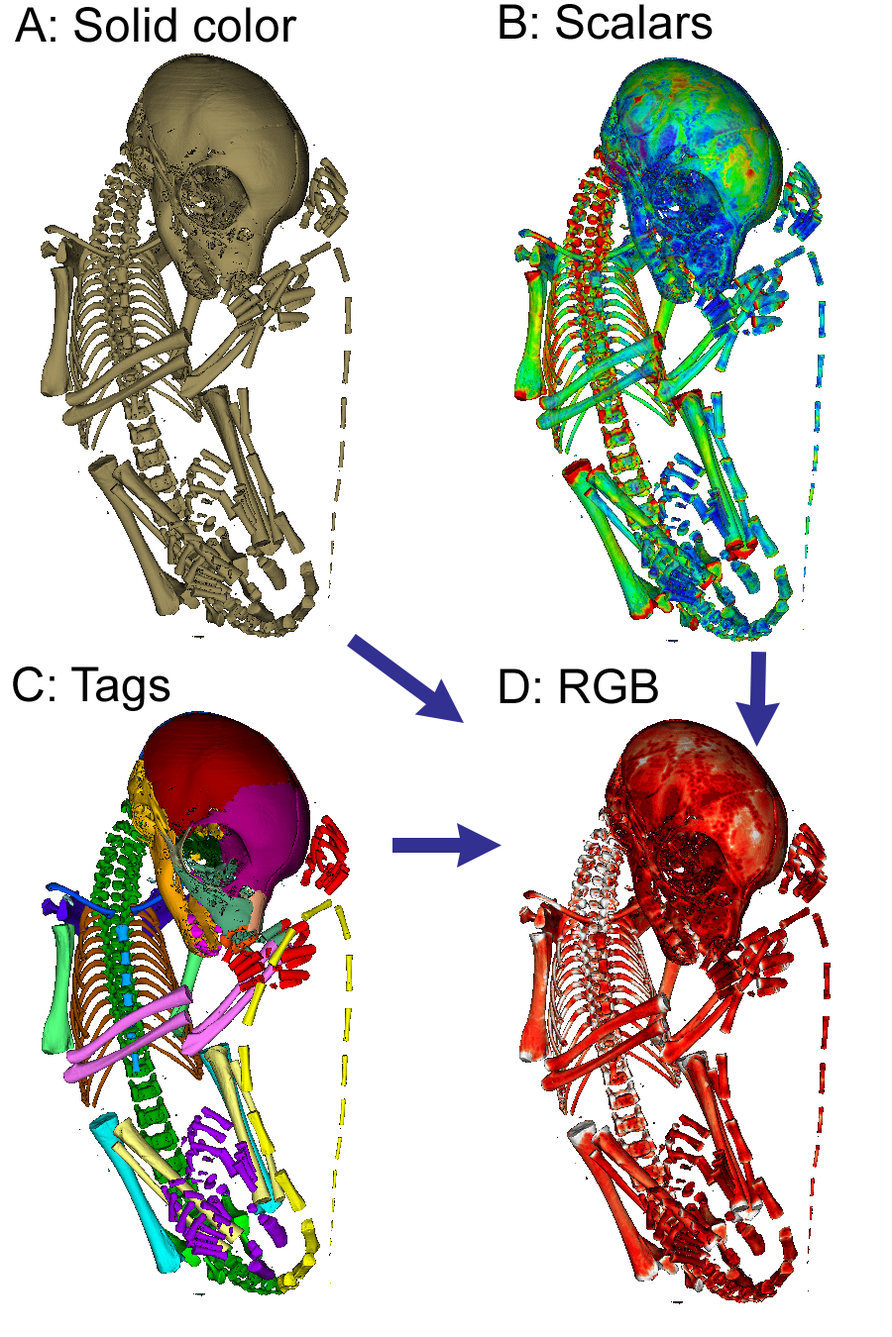
<style>
.page{position:relative;width:892px;height:1337px;background:#ffffff}
.page>*{position:absolute;margin:0}
.t1{font:47.6px "ArialMT";color:#000000}
</style>
<div class="page">
<p class="t1" style="left:499px;top:4px;width:213px;height:36px">B: Scalars</p>
<p class="t1" style="left:15px;top:7px;width:282px;height:36px">A: Solid color</p>
<p class="t1" style="left:13px;top:667px;width:157px;height:44px">C: Tags</p>
<p class="t1" style="left:499px;top:669px;width:159px;height:35px">D: RGB</p>
</div>
